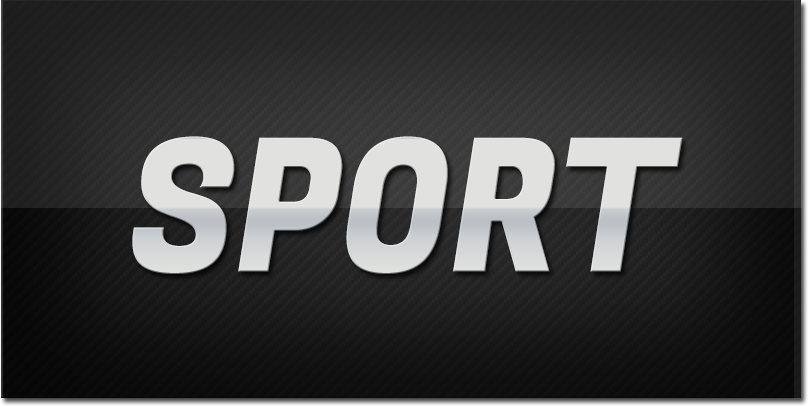
<style>
.page{position:relative;width:808px;height:406px}
.page>*{position:absolute;margin:0}
.t1{font:185.2px "FugazOne-Regular";color:#dfdfdf;scale:0.89 1}
</style>
<div class="page">
<p class="t1" style="left:132px;top:136px;width:551px;height:138px">SPORT</p>
</div>
